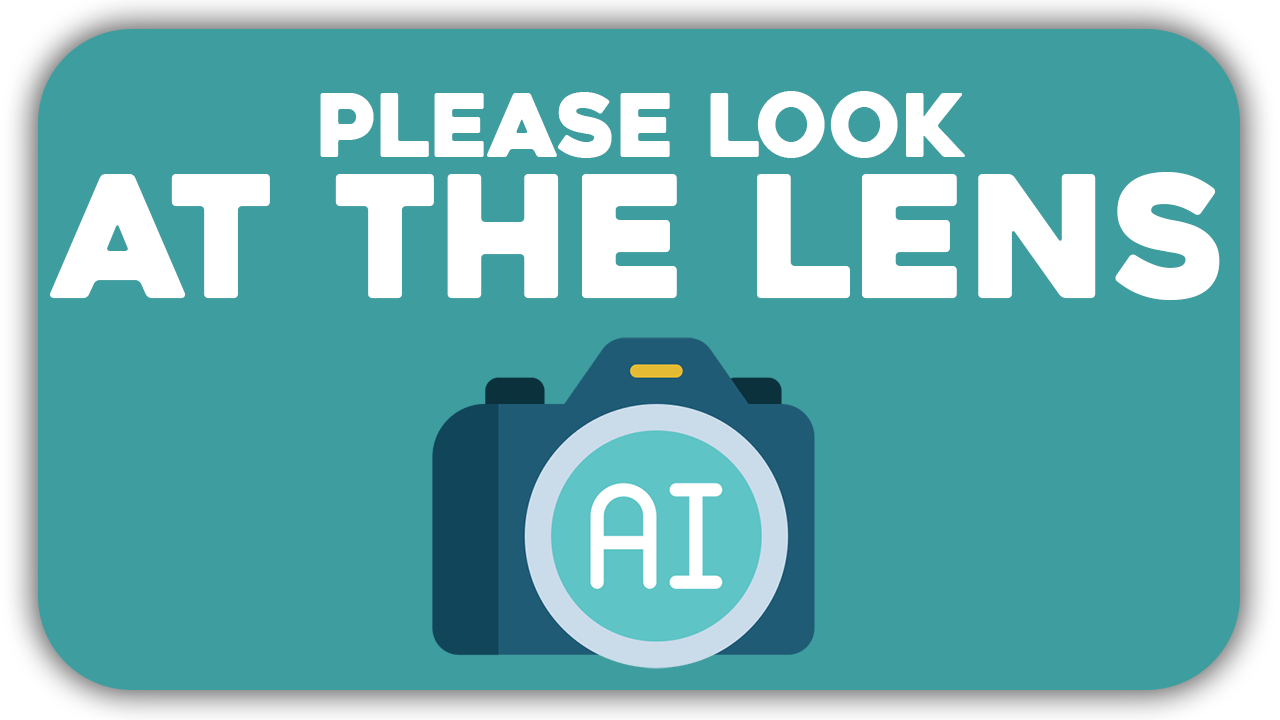
<style>
.page{position:relative;width:1280px;height:720px;background:#3d9d9f}
.page>*{position:absolute;margin:0}
.t1{font:87.8px/141px "Heavitas";color:#ffffff}
.t2{font:170.5px/141px "Heavitas";color:#ffffff}
</style>
<div class="page">
<p class="t1" style="left:50px;top:91px;width:1170px;height:209px;text-align:center">PLEASE LOOK<br><span class="t2">AT THE LENS</span></p>
</div>
